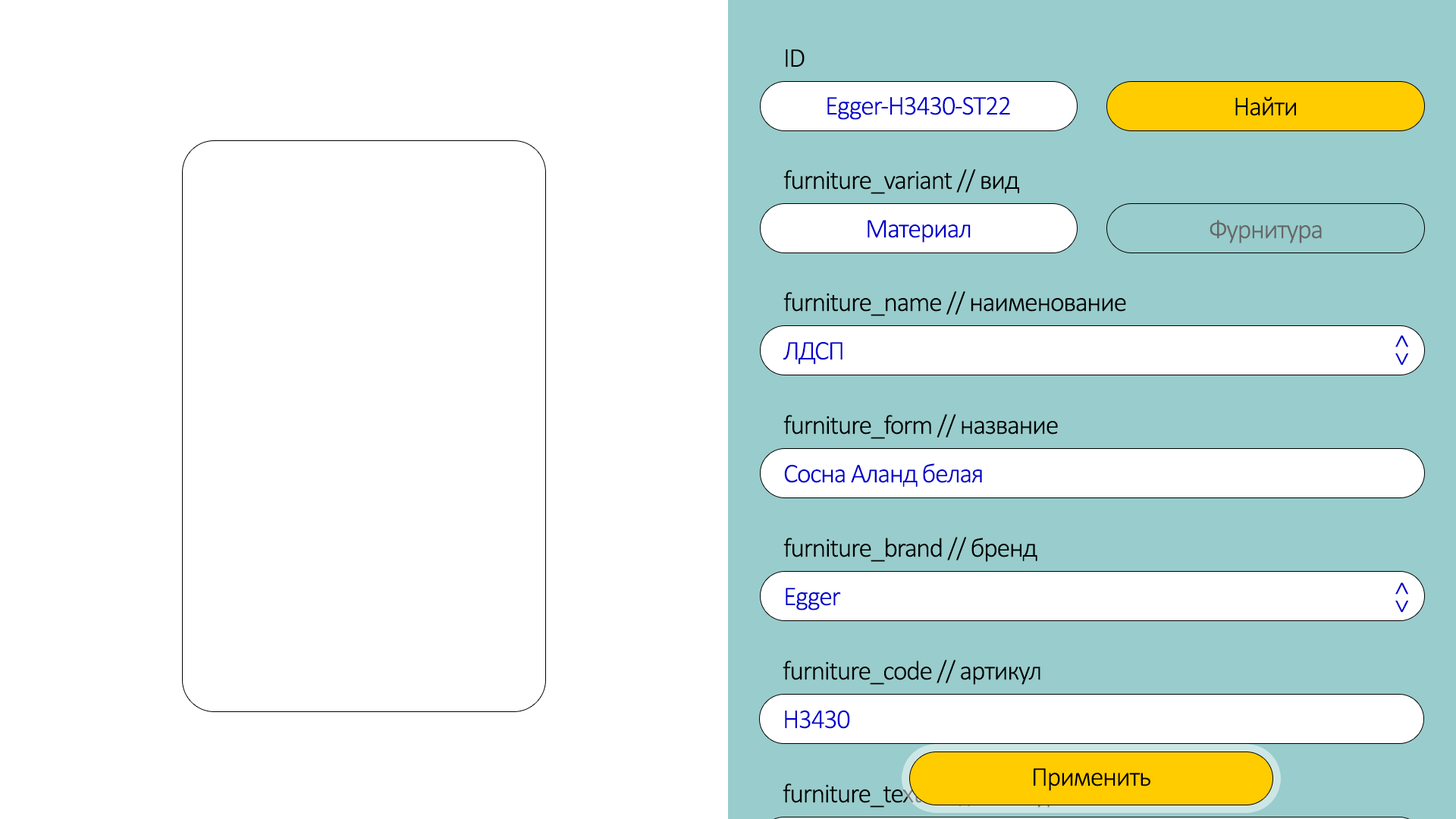
<style>
.page{position:relative;width:1456px;height:819px;background:#ffffff}
.page>*{position:absolute;margin:0}
.t1{font:27.3px "Calibri-Light";letter-spacing:-0.04em;color:#000000}
.t2{font:27.3px "Calibri-Light";letter-spacing:-0.04em;color:#0000cc}
.t3{font:27.3px "Calibri-Light";letter-spacing:-0.04em;color:#666666}
.t4{font:27.3px "Calibri-Light";letter-spacing:-0.04em}
</style>
<div class="page">
<p class="t1" style="left:786px;top:49px;width:19px;height:18px">ID</p>
<p class="t2" style="left:827px;top:96px;width:183px;height:24px">Egger-H3430-ST22</p>
<p class="t1" style="left:1235px;top:96px;width:61px;height:20px">Найти</p>
<p class="t1" style="left:783px;top:169px;width:236px;height:25px">furniture_variant // вид</p>
<p class="t2" style="left:868px;top:220px;width:103px;height:23px">Материал</p>
<p class="t3" style="left:1210px;top:220px;width:112px;height:23px">Фурнитура</p>
<p class="t1" style="left:783px;top:291px;width:343px;height:25px">furniture_name // наименование</p>
<p class="t2" style="left:1395px;top:335px;width:13px;height:31px;rotate:90deg">&lt; &gt;</p>
<p class="t2" style="left:783px;top:342px;width:59px;height:23px">ЛДСП</p>
<p class="t1" style="left:783px;top:414px;width:275px;height:25px">furniture_form // название</p>
<p class="t2" style="left:784px;top:463px;width:198px;height:24px">Сосна Аланд белая</p>
<p class="t1" style="left:783px;top:537px;width:254px;height:25px">furniture_brand // бренд</p>
<p class="t2" style="left:786px;top:588px;width:55px;height:22px">Egger</p>
<p class="t2" style="left:1395px;top:582px;width:13px;height:31px;rotate:90deg">&lt; &gt;</p>
<p class="t1" style="left:783px;top:660px;width:257px;height:25px">furniture_code // артикул</p>
<p class="t2" style="left:785px;top:710px;width:65px;height:19px">H3430</p>
<p class="t1" style="left:1034px;top:768px;width:116px;height:23px">Применить</p>
<p class="t4" style="left:783px;top:783px;width:287px;height:25px">furniture_texture // текстура</p>
</div>
